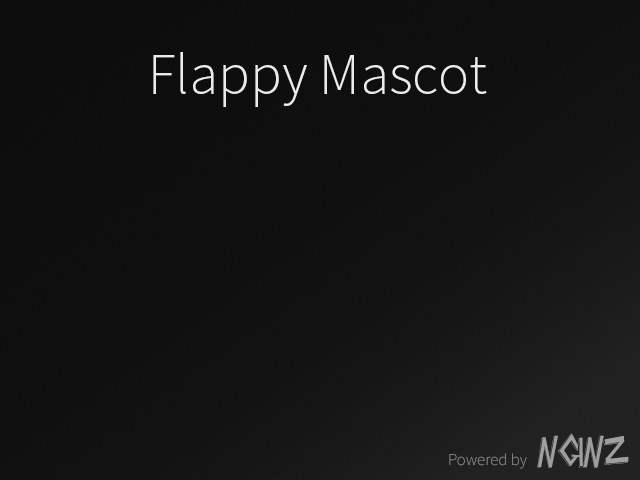
<style>
.page{position:relative;width:640px;height:480px}
.page>*{position:absolute;margin:0}
.t1{font:58.3px "SourceSansPro-Light";color:#ececec}
.t2{font:41.7px "Slaytanic";color:#9f9f9f}
.t3{font:16.7px "SourceSansPro-Light";color:#939393}
</style>
<div class="page">
<p class="t1" style="left:153px;top:52px;width:334px;height:55px">Flappy Mascot</p>
<p class="t2" style="left:537px;top:433px;width:92px;height:35px">nginz</p>
<p class="t3" style="left:449px;top:453px;width:78px;height:16px">Powered by</p>
</div>
